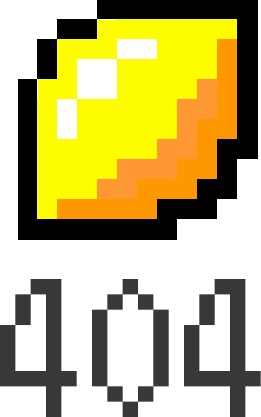
<style>
.page{position:relative;width:261px;height:417px;background:#ffffff}
.page>*{position:absolute;margin:0}
.t1{font:200px "Power-Clear";color:#383838}
</style>
<div class="page">
<p class="t1" style="left:0px;top:279px;width:261px;height:138px">404</p>
</div>
